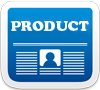
<style>
.page{position:relative;width:100px;height:90px}
.page>*{position:absolute;margin:0}
.t1{font:14px "CooperBlackStd";color:#ffffff}
</style>
<div class="page">
<p class="t1" style="left:10px;top:21px;width:79px;height:10px">PRODUCT</p>
</div>
